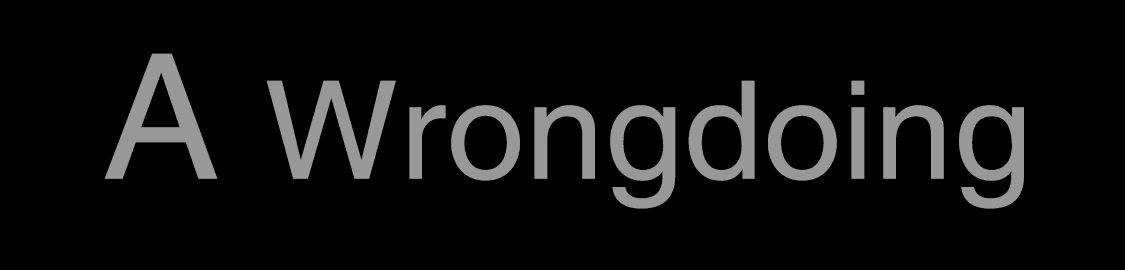
<style>
.page{position:relative;width:1125px;height:270px;background:#000000}
.page>*{position:absolute;margin:0}
.t1{font:173.7px "Helvetica";letter-spacing:0.005em;color:#989898}
.t2{font:135.9px "Helvetica";letter-spacing:0.005em;color:#989898;scale:1.04 1}
</style>
<div class="page">
<p class="t1" style="left:104px;top:53px;width:114px;height:126px">A</p>
<p class="t2" style="left:266px;top:80px;width:758px;height:129px">Wrongdoing</p>
</div>
